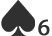
<style>
.page{position:relative;width:52px;height:36px;background:#ffffff}
.page>*{position:absolute;margin:0}
.t1{font:23.4px "MyriadPro-Regular";letter-spacing:-0.1em;color:#303030;font-weight:bold}
</style>
<div class="page">
<p class="t1" style="left:38px;top:19px;width:12px;height:17px">6</p>
</div>
